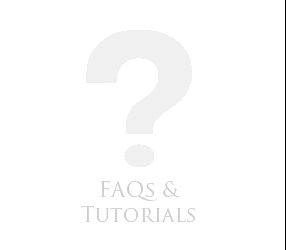
<style>
.page{position:relative;width:286px;height:250px;background:#ffffff}
.page>*{position:absolute;margin:0}
.t1{font:20.8px "TrajanPro-Regular";color:#cdcdcd}
</style>
<div class="page">
<p class="t1" style="left:81px;top:181px;width:114px;height:41px;text-align:center">FAQs &amp;<br>Tutorials</p>
</div>
